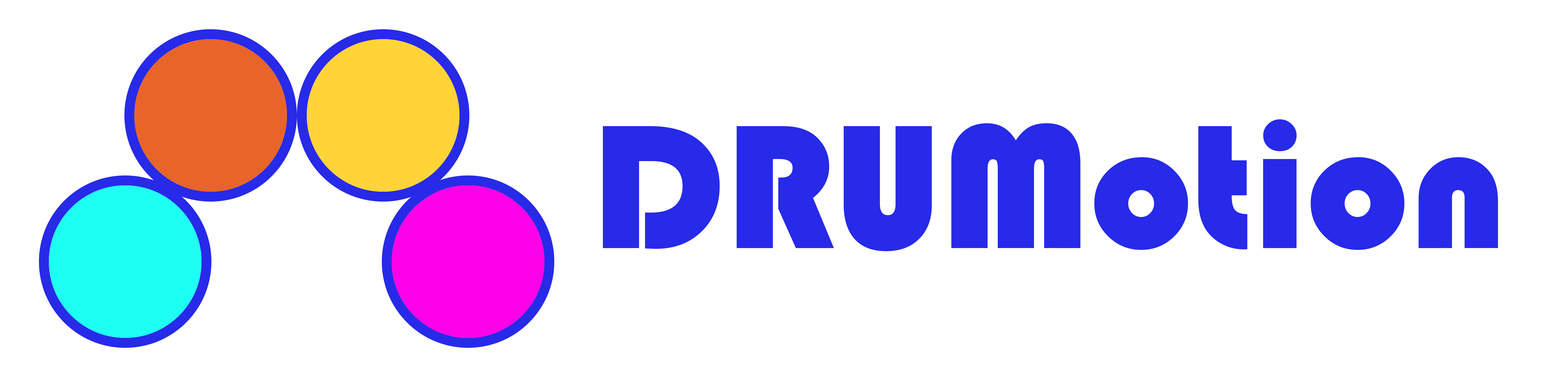
<style>
.page{position:relative;width:1568px;height:376px;background:#ffffff}
.page>*{position:absolute;margin:0}
.t1{font:182.9px "Bauhaus93";color:#272ae8}
</style>
<div class="page">
<p class="t1" style="left:603px;top:119px;width:895px;height:132px">DRUMotion</p>
</div>
